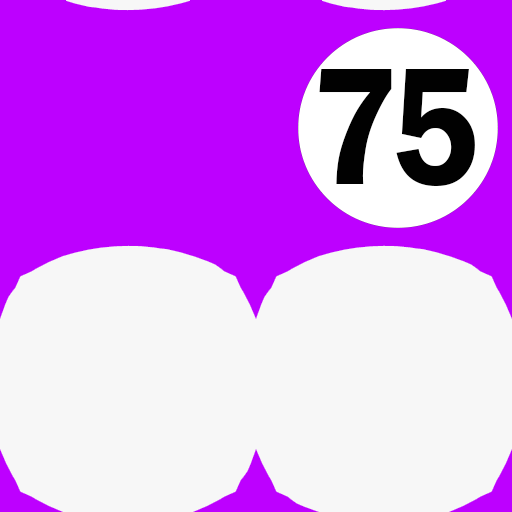
<style>
.page{position:relative;width:512px;height:512px;background:#f7f7f7}
.page>*{position:absolute;margin:0}
.t1{font:172.5px "FranklinGothic-Demi";letter-spacing:-0.05em;color:#010101;scale:0.87 1}
</style>
<div class="page">
<p class="t1" style="left:319px;top:69px;width:156px;height:117px">75</p>
</div>
